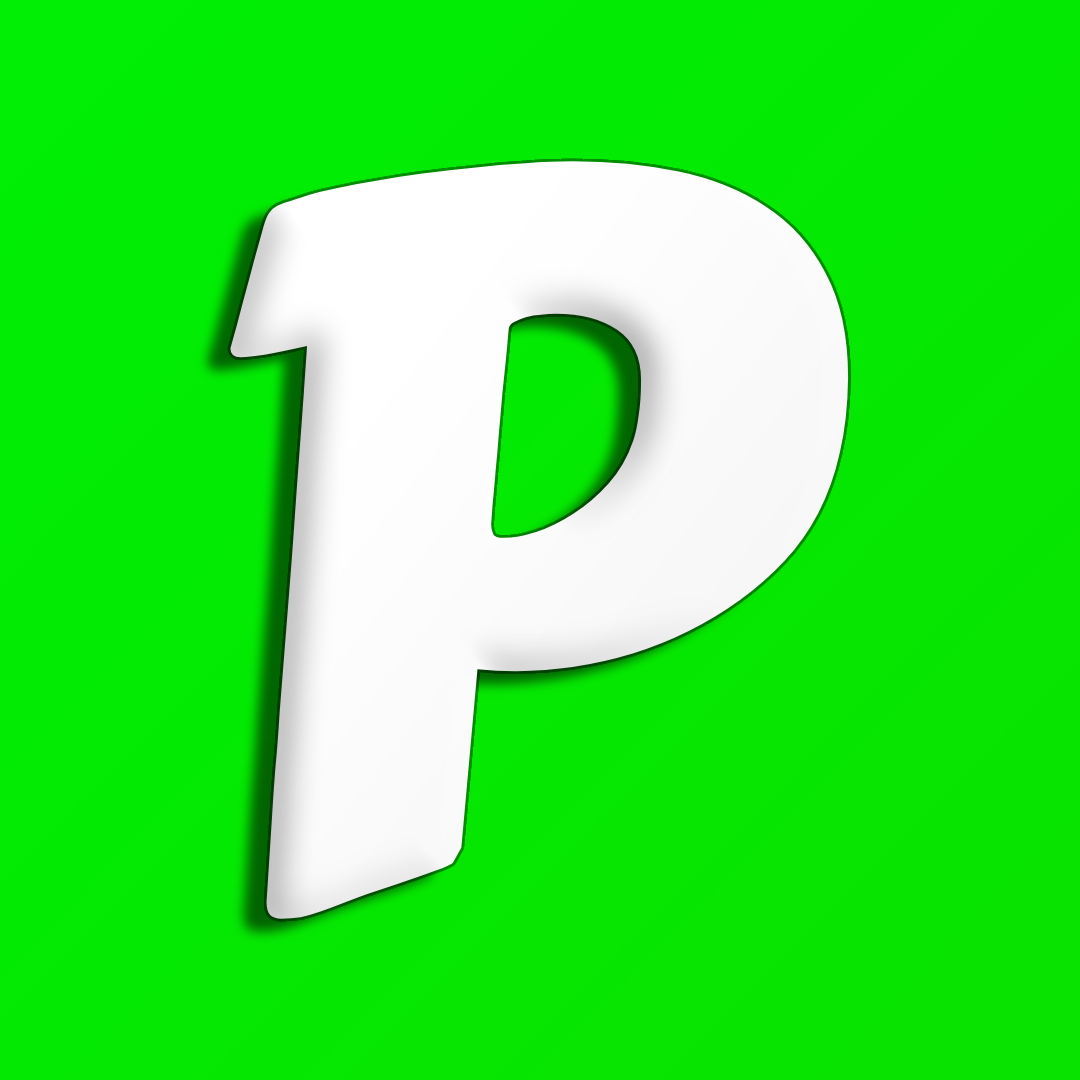
<style>
.page{position:relative;width:1080px;height:1080px}
.page>*{position:absolute;margin:0}
.t1{font:1000px "CarterOne";color:#ffffff}
</style>
<div class="page">
<p class="t1" style="left:230px;top:161px;width:619px;height:758px">P</p>
</div>
